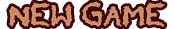
<style>
.page{position:relative;width:174px;height:29px;background:#3b080d}
.page>*{position:absolute;margin:0}
.t1{font:30px "TOBACCO";color:#c4845a;font-weight:bold}
</style>
<div class="page">
<p class="t1" style="left:9px;top:1px;width:156px;height:26px">NEW GAME</p>
</div>
